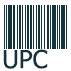
<style>
.page{position:relative;width:71px;height:71px;background:#ffffff}
.page>*{position:absolute;margin:0}
.t1{font:25px "Tahoma";color:#14343b}
</style>
<div class="page">
<p class="t1" style="left:3px;top:49px;width:45px;height:20px">UPC</p>
</div>
